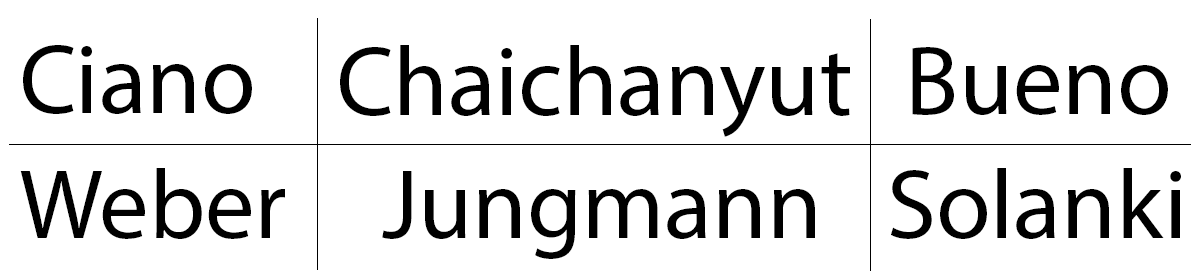
<style>
.page{position:relative;width:1200px;height:280px;background:#ffffff}
.page>*{position:absolute;margin:0}
.t1{font:98.8px "MyriadPro-Regular";color:#000000}
</style>
<div class="page">
<p class="t1" style="left:23px;top:45px;width:229px;height:69px">Ciano</p>
<p class="t1" style="left:340px;top:45px;width:510px;height:92px">Chaichanyut</p>
<p class="t1" style="left:912px;top:47px;width:256px;height:68px">Bueno</p>
<p class="t1" style="left:20px;top:168px;width:265px;height:71px">Weber</p>
<p class="t1" style="left:382px;top:171px;width:433px;height:88px">Jungmann</p>
<p class="t1" style="left:891px;top:168px;width:290px;height:71px">Solanki</p>
</div>
